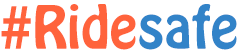
<style>
.page{position:relative;width:240px;height:55px;background:#ffffff}
.page>*{position:absolute;margin:0}
.t1{font:52.5px "HoboStd";color:#ff633c}
.t2{font:52.5px "HoboStd";color:#3283c8}
</style>
<div class="page">
<p class="t1" style="left:1px;top:4px;width:236px;height:46px">#Ride<span class="t2">safe</span></p>
</div>
